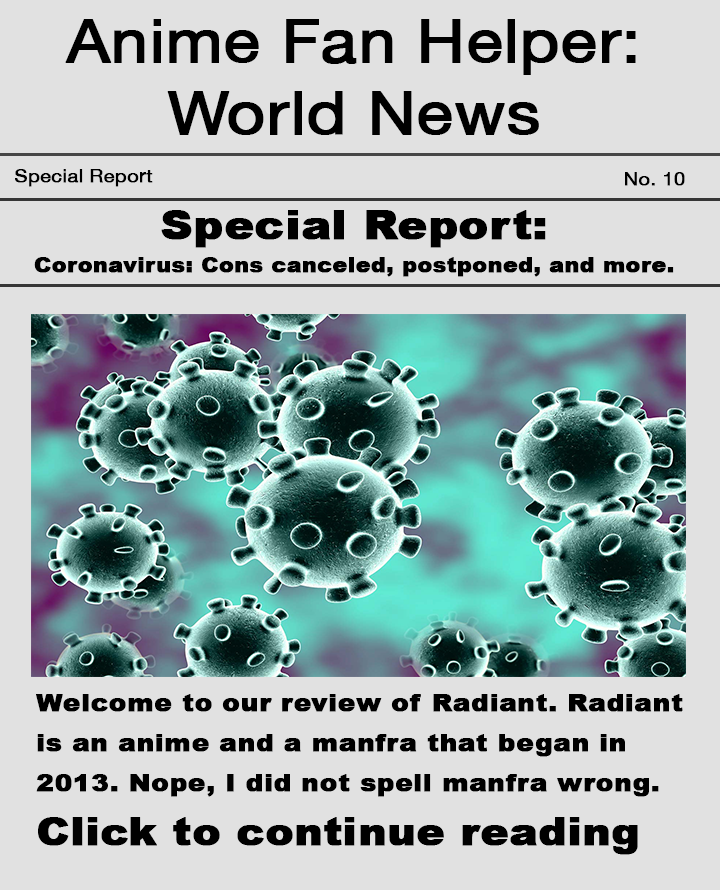
<style>
.page{position:relative;width:720px;height:890px;background:#e1e1e1}
.page>*{position:absolute;margin:0}
.t1{font:60px "HelveticaNeue";color:#000000;font-weight:bold;scale:1.1 1}
.t2{font:18px "HelveticaNeue";color:#000000;font-weight:bold;scale:1.1 1}
.t3{font:20px/33px "Arial-Black";color:#000000;font-weight:bold;scale:1.1 1}
.t4{font:40px/33px "Arial-Black";color:#000000;font-weight:bold;scale:1.1 1}
.t5{font:24px/40px "Arial-Black";color:#000000;font-weight:bold;scale:1.1 1}
.t6{font:38px "Arial-Black";color:#000000;font-weight:bold;scale:1.1 1}
</style>
<div class="page">
<p class="t1" style="left:65px;top:19px;width:571px;height:116px;text-align:center">Anime Fan Helper: World News</p>
<p class="t2" style="left:15px;top:169px;width:138px;height:18px">Special Report</p>
<p class="t2" style="left:625px;top:172px;width:60px;height:14px">No. 10</p>
<p class="t3" style="left:34px;top:210px;width:640px;height:67px;text-align:center"><span class="t4">Special Report: <br></span>Coronavirus: Cons canceled, postponed, and more.</p>
<p class="t5" style="left:36px;top:694px;width:647px;height:103px">Welcome to our review of Radiant. Radiant is an anime and a manfra that began in 2013. Nope, I did not spell manfra wrong.</p>
<p class="t6" style="left:38px;top:817px;width:600px;height:38px">Click to continue reading</p>
</div>
